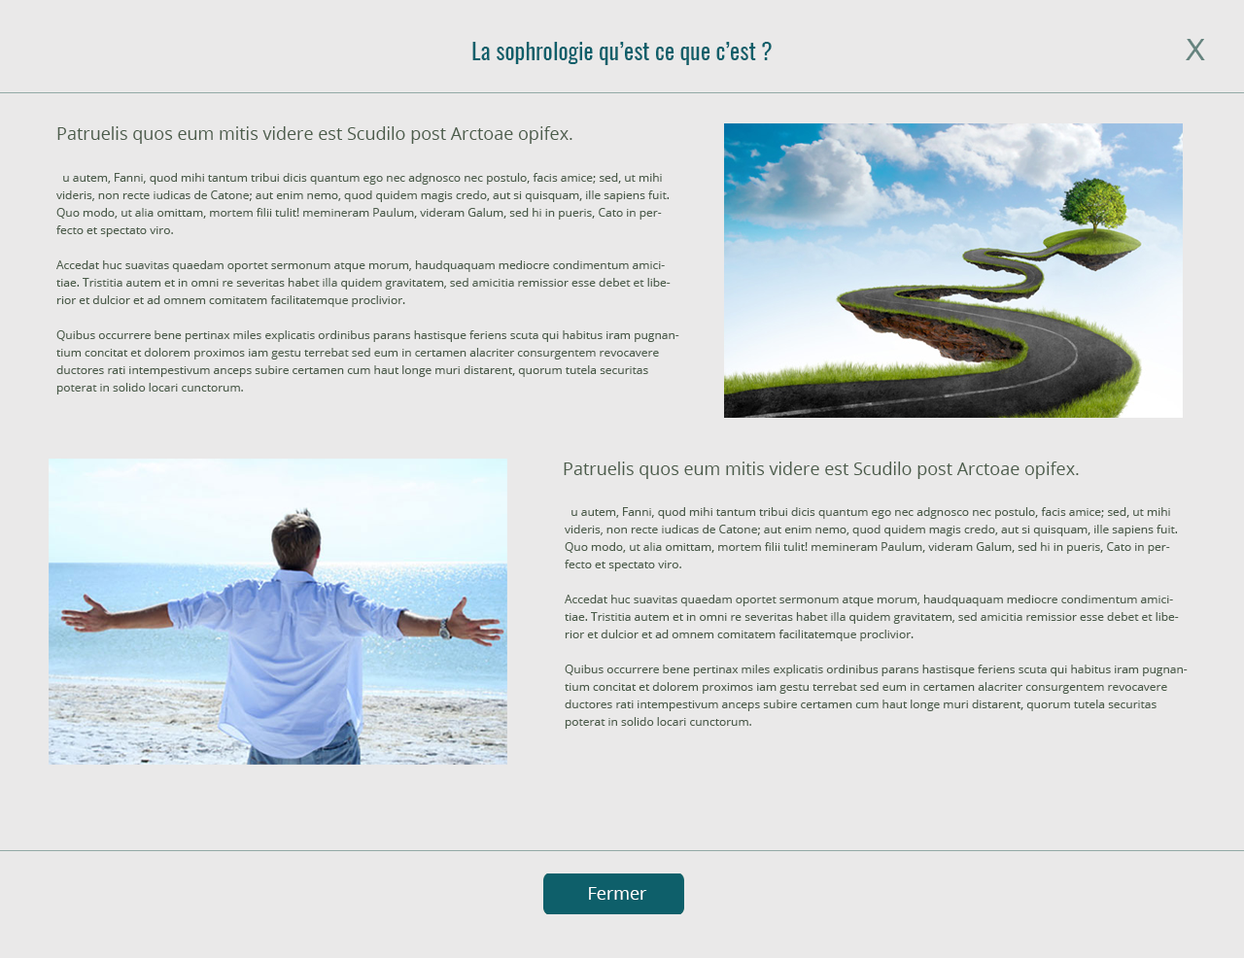
<style>
.page{position:relative;width:1244px;height:958px;background:#eae9e9}
.page>*{position:absolute;margin:0}
.t1{font:23.3px "Oswald-Regular";color:#0e5f6a}
.t2{font:29.2px "ArialMT";color:#66847f}
.t3{font:17.5px "OpenSans";color:#4b5c4a}
.t4{font:11.7px/17.5px "OpenSans";color:#4b5c4a}
.t5{font:17.5px "OpenSans";color:#ffffff}
</style>
<div class="page">
<p class="t1" style="left:472px;top:42px;width:300px;height:23px">La sophrologie qu’est ce que c’est ?</p>
<p class="t2" style="left:1186px;top:39px;width:19px;height:21px">X</p>
<p class="t3" style="left:57px;top:126px;width:516px;height:18px">Patruelis quos eum mitis videre est Scudilo post Arctoae opifex.</p>
<p class="t4" style="left:56px;top:173px;width:623px;height:222px">u autem, Fanni, quod mihi tantum tribui dicis quantum ego nec adgnosco nec postulo, facis amice; sed, ut mihi videris, non recte iudicas de Catone; aut enim nemo, quod quidem magis credo, aut si quisquam, ille sapiens fuit. Quo modo, ut alia omittam, mortem filii tulit! memineram Paulum, videram Galum, sed hi in pueris, Cato in perfecto et spectato viro.<br><br>Accedat huc suavitas quaedam oportet sermonum atque morum, haudquaquam mediocre condimentum amicitiae. Tristitia autem et in omni re severitas habet illa quidem gravitatem, sed amicitia remissior esse debet et liberior et dulcior et ad omnem comitatem facilitatemque proclivior.<br><br>Quibus occurrere bene pertinax miles explicatis ordinibus parans hastisque feriens scuta qui habitus iram pugnantium concitat et dolorem proximos iam gestu terrebat sed eum in certamen alacriter consurgentem revocavere ductores rati intempestivum anceps subire certamen cum haut longe muri distarent, quorum tutela securitas poterat in solido locari cunctorum.</p>
<p class="t3" style="left:564px;top:462px;width:515px;height:17px">Patruelis quos eum mitis videre est Scudilo post Arctoae opifex.</p>
<p class="t4" style="left:565px;top:507px;width:623px;height:222px">u autem, Fanni, quod mihi tantum tribui dicis quantum ego nec adgnosco nec postulo, facis amice; sed, ut mihi videris, non recte iudicas de Catone; aut enim nemo, quod quidem magis credo, aut si quisquam, ille sapiens fuit. Quo modo, ut alia omittam, mortem filii tulit! memineram Paulum, videram Galum, sed hi in pueris, Cato in perfecto et spectato viro.<br><br>Accedat huc suavitas quaedam oportet sermonum atque morum, haudquaquam mediocre condimentum amicitiae. Tristitia autem et in omni re severitas habet illa quidem gravitatem, sed amicitia remissior esse debet et liberior et dulcior et ad omnem comitatem facilitatemque proclivior.<br><br>Quibus occurrere bene pertinax miles explicatis ordinibus parans hastisque feriens scuta qui habitus iram pugnantium concitat et dolorem proximos iam gestu terrebat sed eum in certamen alacriter consurgentem revocavere ductores rati intempestivum anceps subire certamen cum haut longe muri distarent, quorum tutela securitas poterat in solido locari cunctorum.</p>
<p class="t5" style="left:589px;top:887px;width:58px;height:13px">Fermer</p>
</div>
